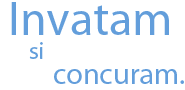
<style>
.page{position:relative;width:185px;height:90px;background:#ffffff}
.page>*{position:absolute;margin:0}
.t1{font:48px "MyriadPro-Regular";color:#639edb}
.t2{font:24px "MyriadPro-Regular";color:#639edb}
.t3{font:30px "MyriadPro-Regular";color:#639edb}
</style>
<div class="page">
<p class="t1" style="left:11px;top:2px;width:158px;height:33px">Invatam</p>
<p class="t2" style="left:29px;top:42px;width:14px;height:17px">si</p>
<p class="t3" style="left:54px;top:69px;width:130px;height:15px">concuram.</p>
</div>
